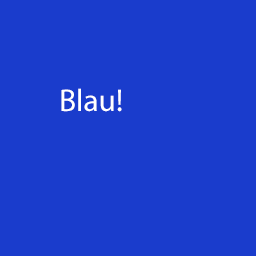
<style>
.page{position:relative;width:256px;height:256px;background:#1a3ccc}
.page>*{position:absolute;margin:0}
.t1{font:31.5px "MyriadPro-Regular";color:#ffffff}
</style>
<div class="page">
<p class="t1" style="left:61px;top:88px;width:61px;height:24px">Blau!</p>
</div>
